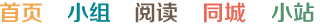
<style>
.page{position:relative;width:320px;height:24px;background:#ffffff}
.page>*{position:absolute;margin:0}
.t1{font:22px "FZZZHONGJW--GB1-0";color:#f4a54a}
.t2{font:22px "FZZZHONGJW--GB1-0";color:#008591}
.t3{font:22px "FZZZHONGJW--GB1-0";color:#6e5b4b}
.t4{font:22px "FZZZHONGJW--GB1-0";color:#eb6857}
.t5{font:22px "FZZZHONGJW--GB1-0";color:#52946f}
</style>
<div class="page">
<p class="t1" style="left:0px;top:2px;width:42px;height:21px">首页</p>
<p class="t2" style="left:68px;top:2px;width:42px;height:20px">小组</p>
<p class="t3" style="left:135px;top:2px;width:42px;height:21px">阅读</p>
<p class="t4" style="left:204px;top:2px;width:42px;height:21px">同城</p>
<p class="t5" style="left:272px;top:2px;width:42px;height:20px">小站</p>
</div>
